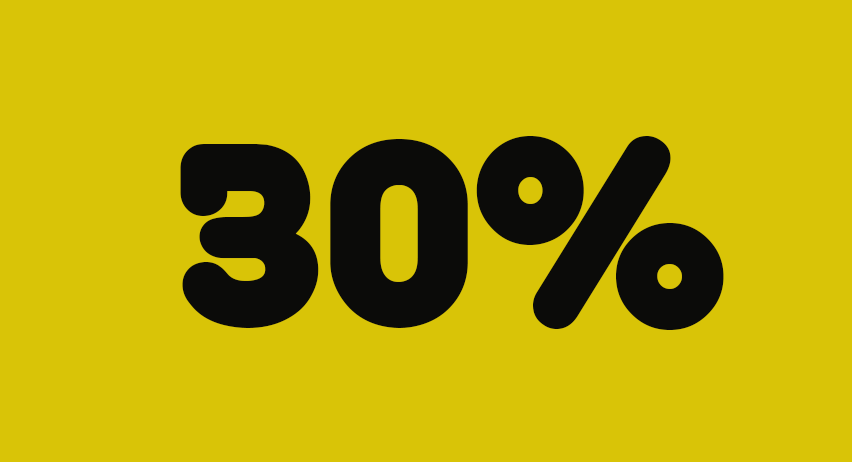
<style>
.page{position:relative;width:852px;height:462px;background:#d9c407}
.page>*{position:absolute;margin:0}
.t1{font:250px "MelodBold";color:#0b0b09}
</style>
<div class="page">
<p class="t1" style="left:180px;top:136px;width:544px;height:194px">30%<br>%%</p>
</div>
